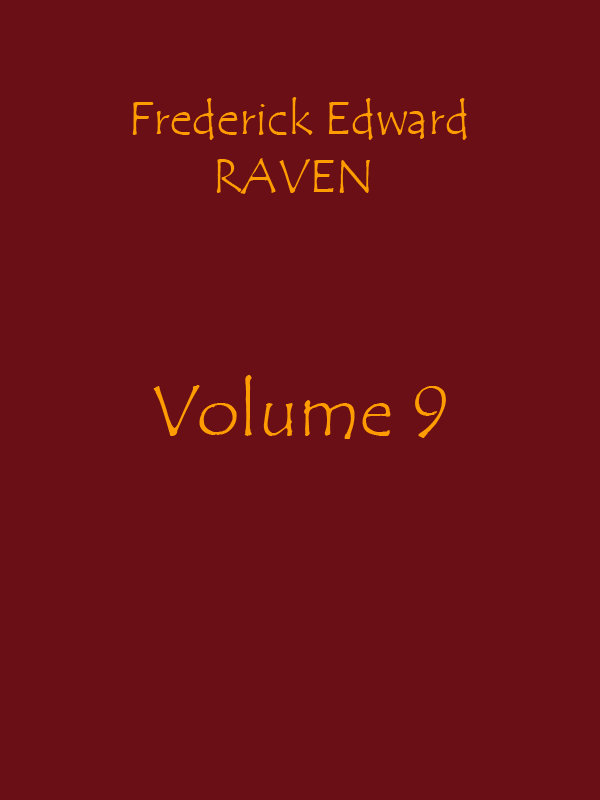
<style>
.page{position:relative;width:600px;height:800px;background:#690f15}
.page>*{position:absolute;margin:0}
.t1{font:48px "TempusSansITC";color:#ff9c00}
.t2{font:72px "TempusSansITC";color:#ff9c00}
</style>
<div class="page">
<p class="t1" style="left:132px;top:97px;width:335px;height:97px;text-align:center">Frederick Edward<br>RAVEN</p>
<p class="t2" style="left:153px;top:375px;width:293px;height:64px">Volume 9</p>
</div>
